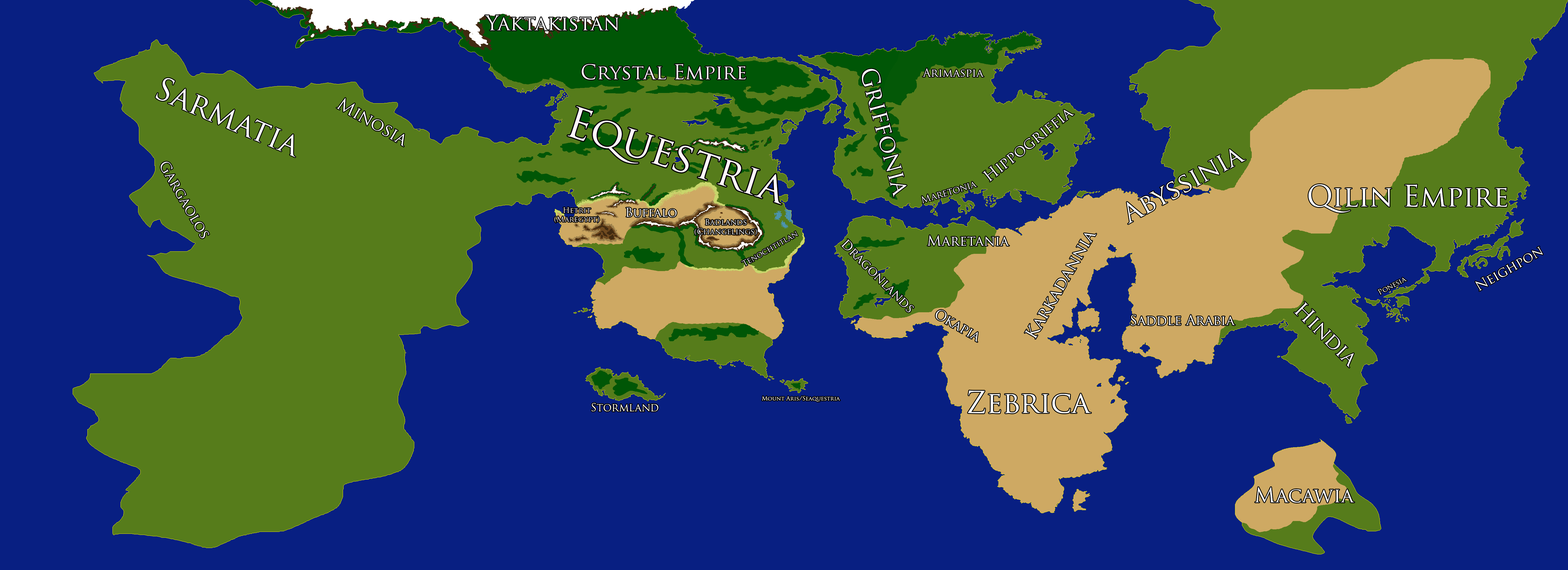
<style>
.page{position:relative;width:1568px;height:570px;background:#081f82}
.page>*{position:absolute;margin:0}
.t1{font:20px "TrajanPro-Regular";color:#ffffff}
.t2{font:20px "TrajanPro-Regular";color:#fef5fa}
.t3{font:30.8px "TrajanPro-Regular";color:#ffffff}
.t4{font:23.4px "TrajanPro-Regular";color:#ffffff}
.t5{font:11.1px "TrajanPro-Regular";color:#ffffff}
.t6{font:16.9px "TrajanPro-Regular";color:#ffffff}
.t7{font:41.1px "TrajanPro-Regular";color:#fef5fa}
.t8{font:15.2px "TrajanPro-Regular";color:#ffffff}
.t9{font:26.1px "TrajanPro-Regular";color:#ffffff}
.t10{font:14.2px "TrajanPro-Regular";color:#ffffff}
.t11{font:9.4px "TrajanPro-Regular";color:#ffffff}
.t12{font:28.8px "TrajanPro-Regular";color:#ffffff}
.t13{font:7.4px "TrajanPro-Regular";color:#fef5fa}
.t14{font:11.8px "TrajanPro-Regular";color:#ffffff}
.t15{font:7.8px "TrajanPro-Regular";color:#ffffff}
.t16{font:7.7px "TrajanPro-Regular";color:#fefefe}
.t17{font:16.5px "TrajanPro-Regular";color:#ffffff}
.t18{font:12.4px "TrajanPro-Regular";color:#ffffff}
.t19{font:13.8px "TrajanPro-Regular";color:#ffffff}
.t20{font:13.4px "TrajanPro-Regular";color:#ffffff}
.t21{font:7.1px "TrajanPro-Regular";color:#ffffff}
.t22{font:20px "TrajanPro-Regular";color:#fefefe}
.t23{font:13.5px "TrajanPro-Regular";color:#ffffff}
.t24{font:5.7px "TrajanPro-Regular";color:#ffffff}
.t25{font:29.5px "TrajanPro-Regular";color:#ffffff}
.t26{font:10.8px "TrajanPro-Regular";color:#ffffff}
</style>
<div class="page">
<p class="t1" style="left:485px;top:15px;width:134px;height:16px">Yaktakistan</p>
<p class="t2" style="left:582px;top:64px;width:164px;height:16px">Crystal Empire</p>
<p class="t3" style="left:156px;top:78px;width:139px;height:79px;rotate:23deg">Sarmatia</p>
<p class="t4" style="left:862px;top:69px;width:45px;height:128px;rotate:75deg">Griffonia</p>
<p class="t5" style="left:923px;top:68px;width:61px;height:9px">Arimaspia</p>
<p class="t6" style="left:336px;top:98px;width:68px;height:49px;rotate:30deg">Minosia</p>
<p class="t7" style="left:568px;top:106px;width:213px;height:98px;rotate:18deg">Equestria</p>
<p class="t8" style="left:983px;top:110px;width:91px;height:72px;rotate:-39deg">Hippogriffia</p>
<p class="t9" style="left:1127px;top:149px;width:119px;height:75px;rotate:-29deg">Abyssinia</p>
<p class="t10" style="left:161px;top:162px;width:48px;height:76px;rotate:60deg">Gargaolos</p>
<p class="t11" style="left:922px;top:182px;width:55px;height:22px;rotate:-17deg">Maretonia</p>
<p class="t12" style="left:1309px;top:184px;width:198px;height:29px">Qilin Empire</p>
<p class="t13" style="left:554px;top:207px;width:45px;height:16px;text-align:center">Hetrit<br>(Maregypt)</p>
<p class="t14" style="left:626px;top:208px;width:51px;height:9px">Buffalo</p>
<p class="t15" style="left:695px;top:219px;width:62px;height:17px;text-align:center">Badlands<br>(Changelings)</p>
<p class="t16" style="left:741px;top:231px;width:57px;height:35px;rotate:-30deg">Tenochtitlan</p>
<p class="t17" style="left:1025px;top:233px;width:71px;height:106px;rotate:-60deg">Karkadannia</p>
<p class="t18" style="left:841px;top:239px;width:73px;height:73px;rotate:45deg">Dragonlands</p>
<p class="t19" style="left:927px;top:235px;width:82px;height:11px">Maretania</p>
<p class="t20" style="left:1475px;top:246px;width:68px;height:45px;rotate:-30deg">Neighpon</p>
<p class="t21" style="left:1378px;top:278px;width:29px;height:17px;rotate:-28deg">Ponesia</p>
<p class="t22" style="left:1294px;top:302px;width:60px;height:66px;rotate:45deg">Hindia</p>
<p class="t23" style="left:936px;top:310px;width:42px;height:32px;rotate:30deg">Okapia</p>
<p class="t23" style="left:1131px;top:315px;width:104px;height:10px">Saddle Arabia</p>
<p class="t24" style="left:762px;top:396px;width:78px;height:6px">Mount Aris/Seaquestria</p>
<p class="t25" style="left:968px;top:391px;width:123px;height:22px">Zebrica</p>
<p class="t26" style="left:592px;top:403px;width:66px;height:9px">Stormland</p>
<p class="t1" style="left:1255px;top:487px;width:99px;height:16px">Macawia</p>
</div>
